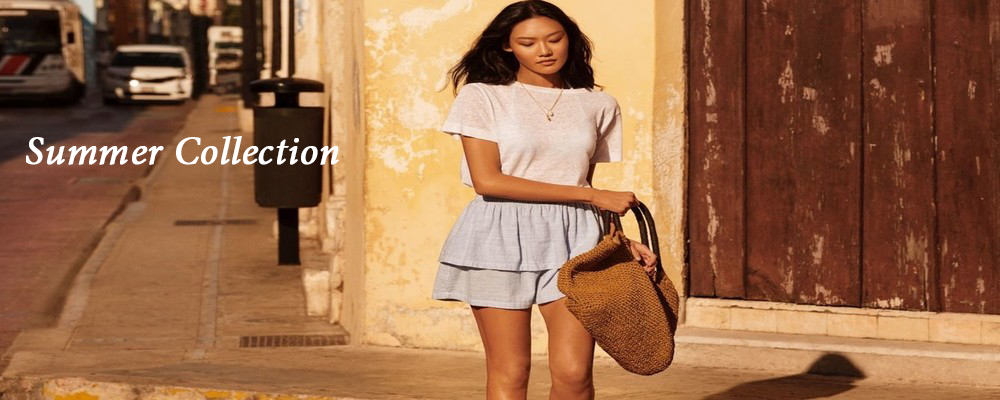
<style>
.page{position:relative;width:1000px;height:400px}
.page>*{position:absolute;margin:0}
.t1{font:40px "MinionPro-It";color:#ffffff;font-weight:bold}
</style>
<div class="page">
<p class="t1" style="left:26px;top:136px;width:313px;height:29px">Summer Collection</p>
</div>
